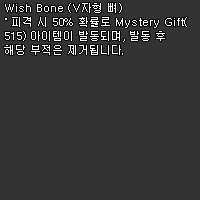
<style>
.page{position:relative;width:200px;height:200px;background:#333333}
.page>*{position:absolute;margin:0}
.t1{font:11px/14px "Dotum";color:#ffffff}
</style>
<div class="page">
<p class="t1" style="left:4px;top:3px;width:183px;height:52px">Wish Bone (V자형 뼈)<br>˚ 피격 시 50% 확률로 Mystery Gift(<br>515) 아이템이 발동되며, 발동 후 <br>해당 부적은 제거됩니다.</p>
</div>
